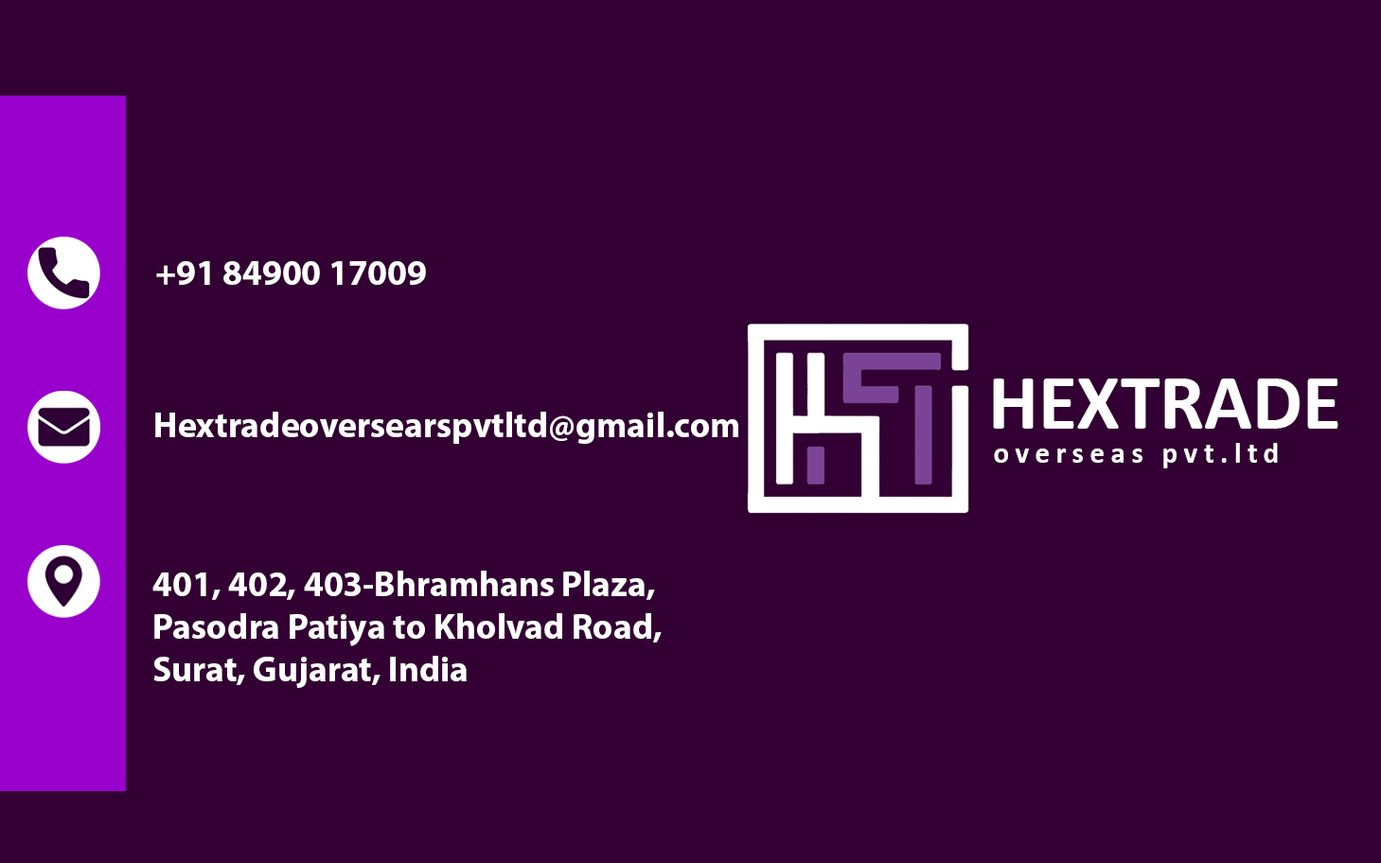
<style>
.page{position:relative;width:1381px;height:863px;background:#330033}
.page>*{position:absolute;margin:0}
.t1{font:35.5px "MyriadPro-Bold";color:#ffffff}
.t2{font:79.2px "Calibri-Bold";color:#ffffff}
.t3{font:29.8px "Calibri-Bold";letter-spacing:0.2em;color:#ffffff}
</style>
<div class="page">
<p class="t1" style="left:156px;top:261px;width:270px;height:24px">+91 84900 17009</p>
<p class="t2" style="left:993px;top:379px;width:346px;height:50px">HEXTRADE</p>
<p class="t1" style="left:155px;top:412px;width:583px;height:32px">Hextradeoversearspvtltd@gmail.com</p>
<p class="t3" style="left:994px;top:443px;width:284px;height:26px">overseas pvt.ltd</p>
<p class="t1" style="left:152px;top:571px;width:510px;height:117px">401, 402, 403-Bhramhans Plaza, <br>Pasodra Patiya to Kholvad Road, <br>Surat, Gujarat, India</p>
</div>
